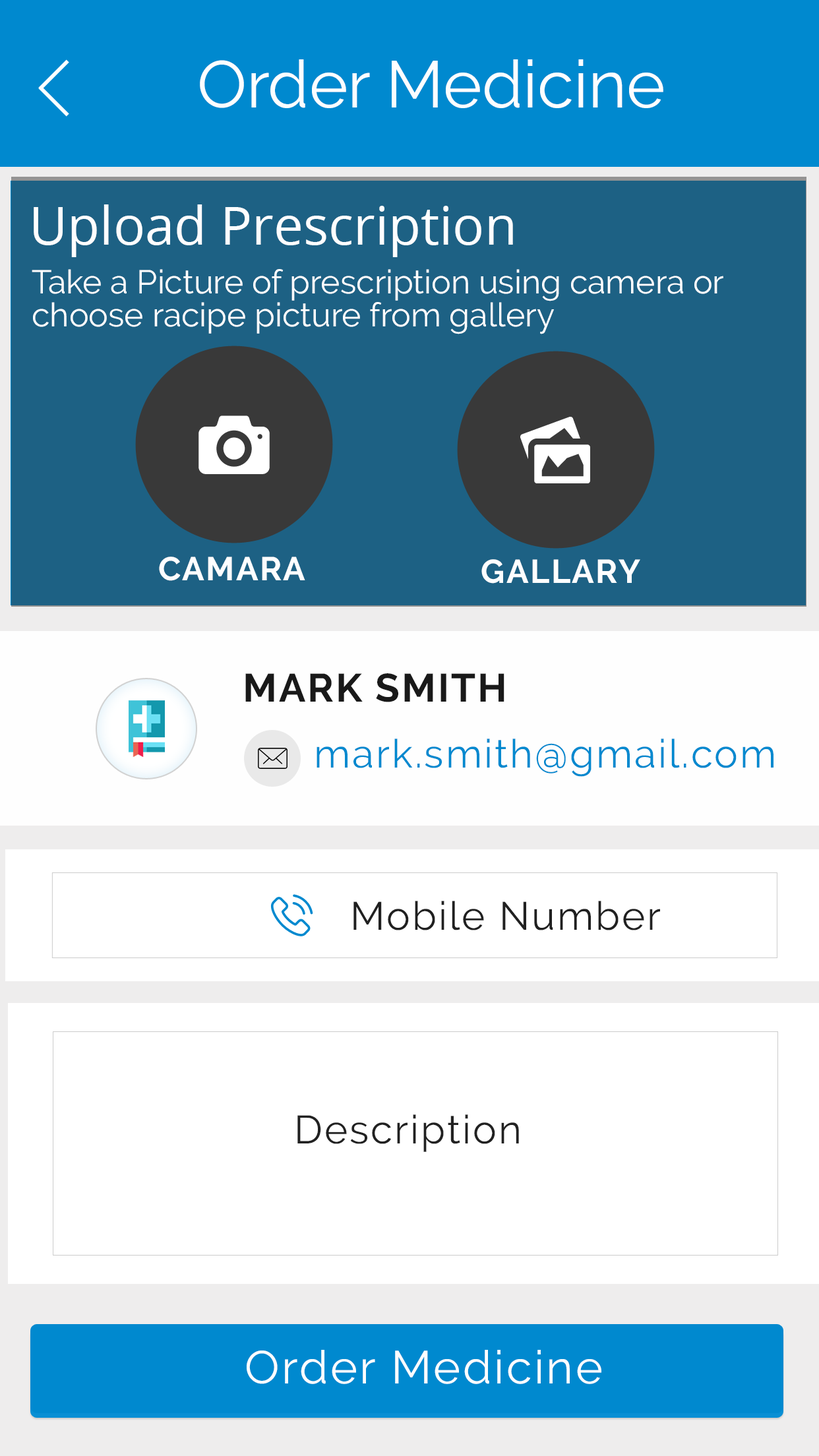
<style>
.page{position:relative;width:819px;height:1456px;background:#ffffff}
.page>*{position:absolute;margin:0}
.t1{font:65.9px "Raleway-Regular";color:#fdfeff}
.t2{font:52.8px "OpenSans";color:#fdfeff}
.t3{font:33px/33px "Raleway-Regular";color:#fdfeff}
.t4{font:33px "Raleway-Bold";letter-spacing:0.05em;color:#fdfeff}
.t5{font:39.6px "Raleway-Bold";letter-spacing:0.05em;color:#191919}
.t6{font:39.6px "Raleway-Regular";letter-spacing:0.05em;color:#0089cf}
.t7{font:39.6px "Raleway-Regular";letter-spacing:0.05em;color:#202020}
.t8{font:39.6px "Raleway-Regular";letter-spacing:0.05em;color:#212121}
.t9{font:46.2px "Raleway-Regular";letter-spacing:0.05em;color:#fcfdfe}
</style>
<div class="page">
<p class="t1" style="left:200px;top:59px;width:463px;height:49px">Order Medicine</p>
<p class="t2" style="left:34px;top:204px;width:479px;height:53px">Upload Prescription</p>
<p class="t3" style="left:32px;top:269px;width:691px;height:65px">Take a Picture of prescription using camera or <br>choose racipe picture from gallery</p>
<p class="t4" style="left:159px;top:557px;width:146px;height:24px">CAMARA</p>
<p class="t4" style="left:481px;top:559px;width:159px;height:25px">GALLARY</p>
<p class="t5" style="left:245px;top:673px;width:259px;height:29px">MARK SMITH</p>
<p class="t6" style="left:317px;top:739px;width:456px;height:38px">mark.smith@gmail.com</p>
<p class="t7" style="left:353px;top:901px;width:307px;height:29px">Mobile Number</p>
<p class="t8" style="left:297px;top:1114px;width:222px;height:38px">Description</p>
<p class="t9" style="left:247px;top:1350px;width:354px;height:34px">Order Medicine</p>
</div>
